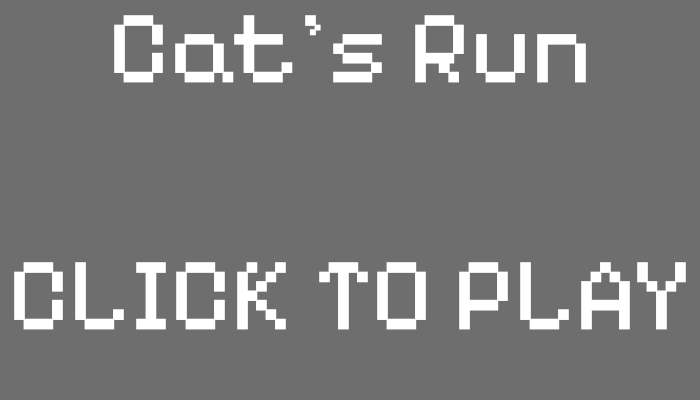
<style>
.page{position:relative;width:700px;height:400px;background:#6e6e6f}
.page>*{position:absolute;margin:0}
.t1{font:104.2px "PixelifySans-Regular";color:#ffffff}
</style>
<div class="page">
<p class="t1" style="left:14px;top:15px;width:672px;height:315px;text-align:center">Cat’s Run<br><br>CLICK TO PLAY</p>
</div>
